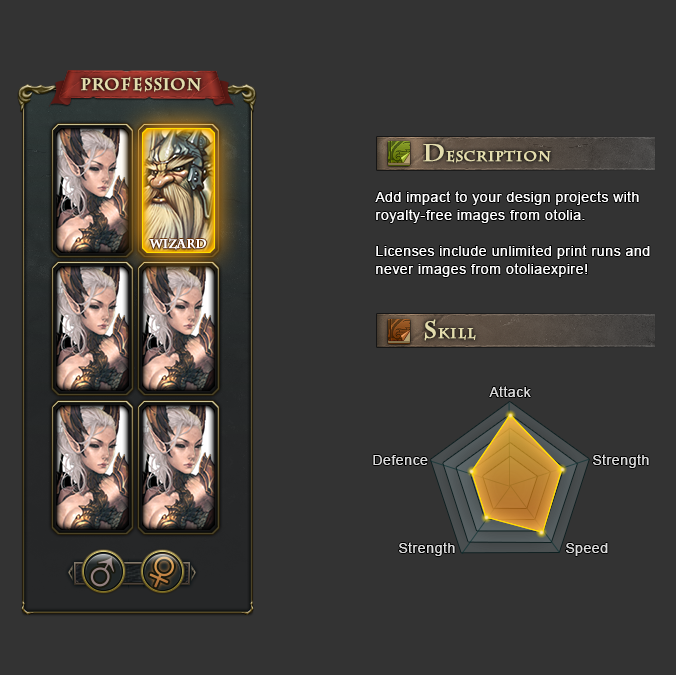
<style>
.page{position:relative;width:676px;height:675px;background:#333333}
.page>*{position:absolute;margin:0}
.t1{font:16px "CharlemagneStd-Bold";letter-spacing:0.03em;color:#e3dcad;font-weight:bold}
.t2{font:14px "CharlemagneStd-Bold";letter-spacing:0.03em;color:#e3dcad;font-weight:bold}
.t3{font:24px "CharlemagneStd-Bold";letter-spacing:0.03em;color:#e3dcad;font-weight:bold}
.t4{font:14px/18px "ArialMT";letter-spacing:0.03em;color:#ffffff}
.t5{font:12px "CharlemagneStd-Bold";letter-spacing:-0.01em;color:#ffffff;font-weight:bold}
.t6{font:14px "ArialMT";letter-spacing:0.03em;color:#f0eecf}
</style>
<div class="page">
<p class="t1" style="left:81px;top:76px;width:121px;height:16px">PROFESSION</p>
<p class="t2" style="left:423px;top:144px;width:128px;height:19px"><span class="t3">d</span>escription</p>
<p class="t4" style="left:375px;top:191px;width:275px;height:86px">Add impact to your design projects with royalty-free images from otolia.<br><br>Licenses include unlimited print runs and never images from otoliaexpire!</p>
<p class="t5" style="left:149px;top:238px;width:58px;height:12px">Wizard</p>
<p class="t2" style="left:424px;top:319px;width:52px;height:22px"><span class="t3">S</span>KILL</p>
<p class="t6" style="left:489px;top:386px;width:42px;height:11px">Attack</p>
<p class="t6" style="left:373px;top:455px;width:55px;height:10px">Defence</p>
<p class="t6" style="left:593px;top:454px;width:56px;height:14px">Strength</p>
<p class="t6" style="left:399px;top:542px;width:56px;height:14px">Strength</p>
<p class="t6" style="left:566px;top:543px;width:42px;height:13px">Speed</p>
</div>
